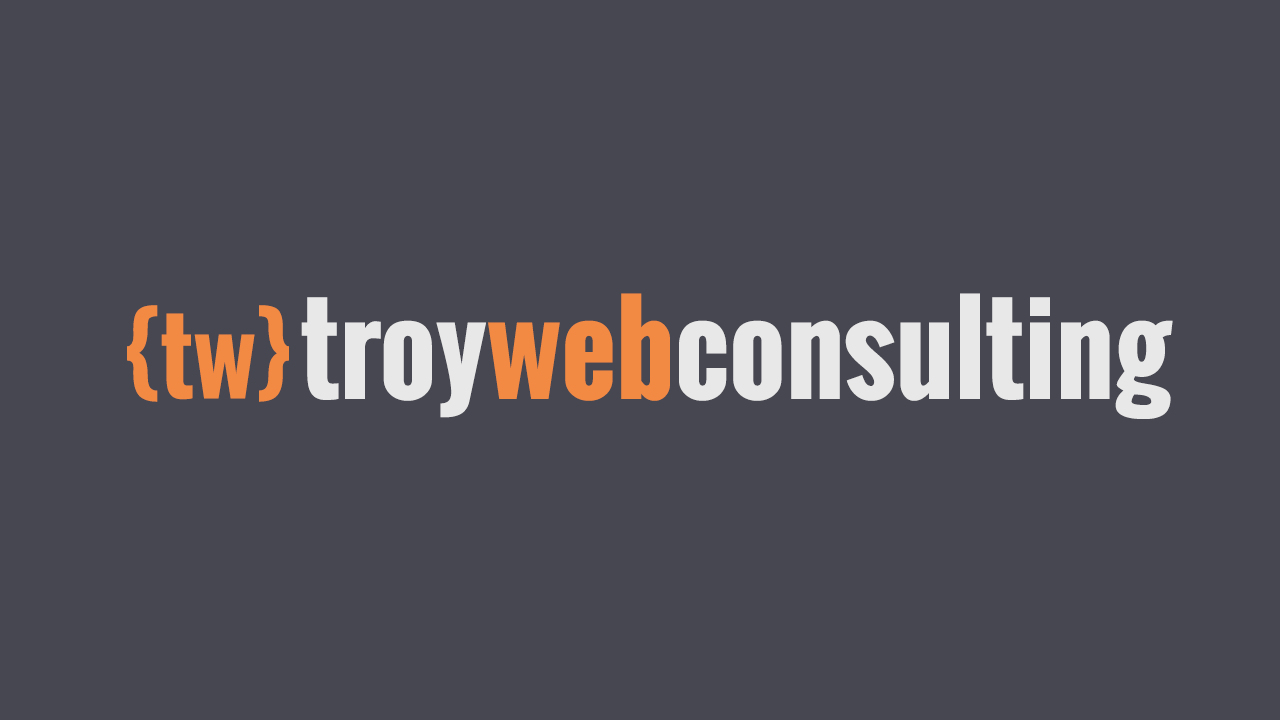
<style>
.page{position:relative;width:1280px;height:720px;background:#474751}
.page>*{position:absolute;margin:0}
.t1{font:120px "Oswald-Bold";color:#e8e8e8}
.t2{font:120px "Oswald-Bold";color:#f38a44}
.t3{font:100px "Oswald-Bold";color:#f38a44}
</style>
<div class="page">
<p class="t1" style="left:301px;top:293px;width:872px;height:126px">troy<span class="t2">web</span>consulting</p>
<p class="t3" style="left:127px;top:305px;width:162px;height:97px">{tw}</p>
</div>
